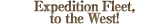
<style>
.page{position:relative;width:167px;height:26px;background:#ffffff}
.page>*{position:absolute;margin:0}
.t1{font:14px/12px "RyuminPro-ExBold";letter-spacing:-0.08em;color:#6b573e;font-weight:bold}
</style>
<div class="page">
<p class="t1" style="left:34px;top:0px;width:101px;height:24px;text-align:center">Expedition Fleet,<br>to the West!</p>
</div>
